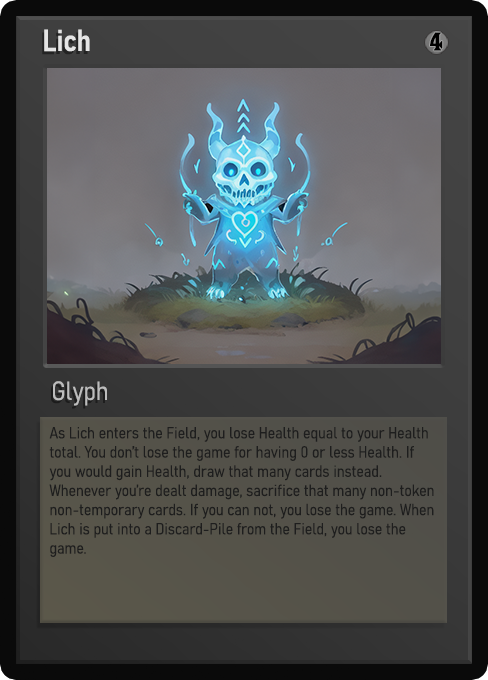
<style>
.page{position:relative;width:488px;height:680px}
.page>*{position:absolute;margin:0}
.t1{font:30px "Bahnschrift-SemiBoldSemiCondensed";color:#f2f2f2;font-weight:bold}
.t2{font:25px "WTRRoycroft";color:#000000;font-weight:bold;scale:1.09 1}
.t3{font:26px "Bahnschrift-LightSemiCondensed";color:#c8c8c8;font-weight:bold}
.t4{font:16px "Bahnschrift-LightSemiCondensed";color:#1e1e1e;font-weight:bold}
</style>
<div class="page">
<p class="t1" style="left:44px;top:29px;width:46px;height:23px;opacity:0.9">Lich</p>
<p class="t2" style="left:430px;top:32px;width:13px;height:19px">4</p>
<p class="t3" style="left:53px;top:381px;width:54px;height:25px;opacity:0.9">Glyph</p>
<p class="t4" style="left:49px;top:427px;width:385px;height:130px">As Lich enters the Field, you lose Health equal to your Health total. You don’t lose the game for having 0 or less Health. If you would gain Health, draw that many cards instead. Whenever you’re dealt damage, sacrifice that many non-token non-temporary cards. If you can not, you lose the game. When Lich is put into a Discard-Pile from the Field, you lose the game.</p>
</div>
